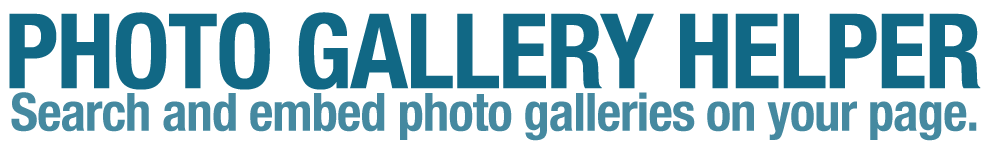
<style>
.page{position:relative;width:990px;height:150px;background:#ffffff}
.page>*{position:absolute;margin:0}
.t1{font:104px "HelveticaNeue-CondensedBold";letter-spacing:-0.02em;color:#116885;text-transform:uppercase}
.t2{font:53px "HelveticaNeue-CondensedBold";letter-spacing:-0.02em;color:#4589a0}
</style>
<div class="page">
<p class="t1" style="left:9px;top:12px;width:972px;height:78px">PHOTO GALLERY HELPER</p>
<p class="t2" style="left:11px;top:92px;width:966px;height:49px">Search and embed photo galleries on your page.</p>
</div>
